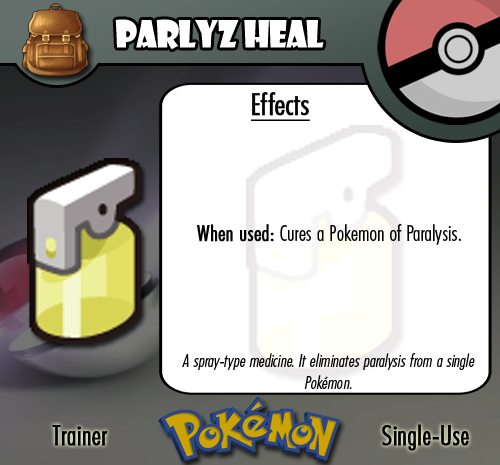
<style>
.page{position:relative;width:500px;height:465px;background:#ffffff}
.page>*{position:absolute;margin:0}
.t1{font:36.7px "ShowcardGothic-Reg";letter-spacing:-0.025em;color:#ffffff;scale:0.91 1}
.t2{font:22.2px "FuturaCondensedBQ-Light";color:#010101}
.t3{font:27.8px "FuturaCondensedBQ-Light";color:#010101;font-weight:bold}
.t4{font:30.6px "FuturaCondensedBQ-Light";color:#010101;font-weight:bold;text-decoration:underline}
.t5{font:22.2px "FuturaCondensedBQ-Light";color:#010101;font-weight:bold}
.t6{font:18.1px "FuturaCondensedBQ-Light";color:#010101;font-style:italic}
</style>
<div class="page">
<p class="t1" style="left:115px;top:19px;width:209px;height:31px">Parlyz Heal</p>
<p class="t2" style="left:197px;top:92px;width:264px;height:153px"><span class="t3">  </span><span class="t4">Effects<br><br><br><br></span><span class="t5">When used: </span>Cures a Pokemon of Paralysis.</p>
<p class="t6" style="left:182px;top:353px;width:293px;height:36px;text-align:center">A spray-type medicine. It eliminates paralysis from a single Pokémon.</p>
<p class="t3" style="left:52px;top:425px;width:55px;height:21px">Trainer</p>
<p class="t3" style="left:382px;top:424px;width:87px;height:27px">Single-Use</p>
</div>
